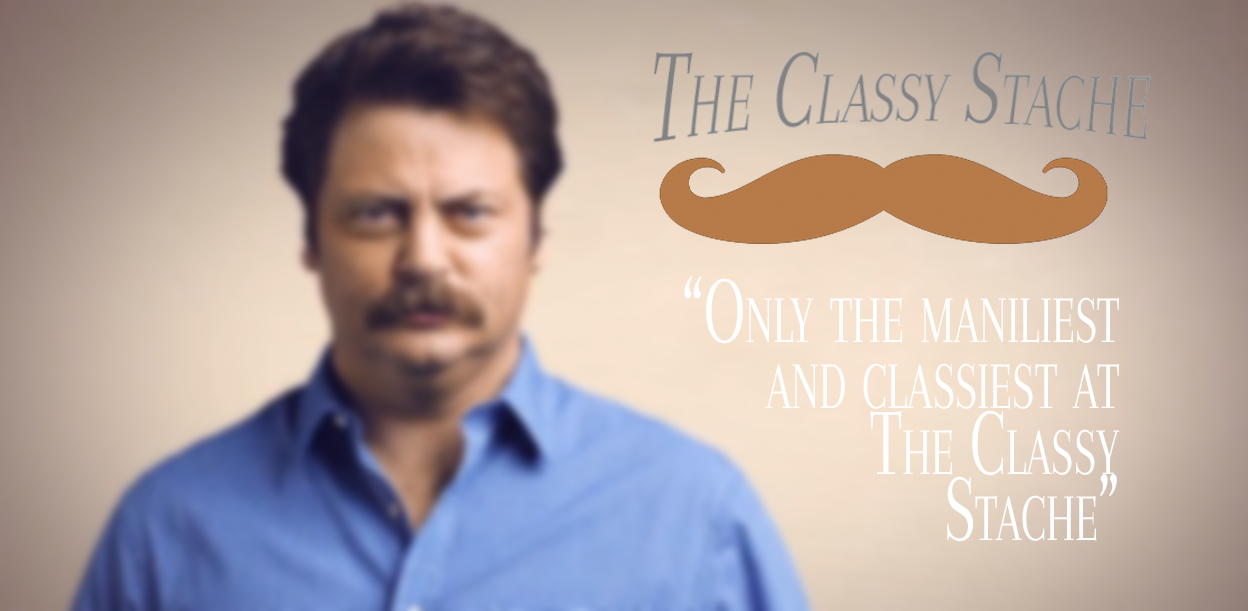
<style>
.page{position:relative;width:1248px;height:611px}
.page>*{position:absolute;margin:0}
.t1{font:98.5px "Arapey-Regular";color:#ffffff;font-variant:small-caps;scale:0.65 1}
</style>
<div class="page">
<p class="t1" style="left:684px;top:276px;width:436px;height:266px;text-align:right">“Only the maniliest and classiest at The Classy Stache”</p>
</div>
